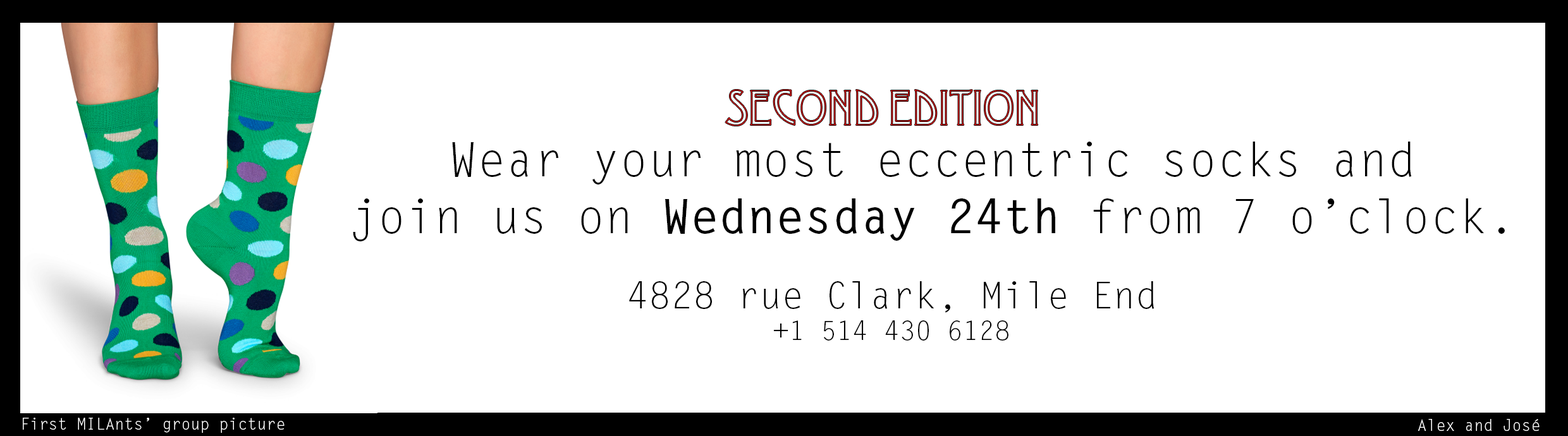
<style>
.page{position:relative;width:1568px;height:436px;background:#ffffff}
.page>*{position:absolute;margin:0}
.t1{font:47.4px "Desdemona";color:#f31010}
.t2{font:47.4px "LetterGothicStd";color:#000000}
.t3{font:47.4px "LetterGothicStd-Bold";color:#000000}
.t4{font:36.9px "LetterGothicStd";color:#000000}
.t5{font:26.3px "LetterGothicStd";color:#000000}
.t6{font:15.8px "LetterGothicStd";color:#ffffff}
</style>
<div class="page">
<p class="t1" style="left:725px;top:90px;width:313px;height:36px">SECOND EDITION</p>
<p class="t2" style="left:353px;top:142px;width:1152px;height:100px;text-align:center">Wear your most eccentric socks and<br>join us on <span class="t3">Wednesday 24th</span> from 7 o’clock.</p>
<p class="t4" style="left:629px;top:281px;width:526px;height:60px;text-align:center">4828 rue Clark, Mile End<br><span class="t5">+1 514 430 6128</span></p>
<p class="t6" style="left:23px;top:418px;width:262px;height:15px">First MILAnts’ group picture</p>
<p class="t6" style="left:1418px;top:419px;width:122px;height:12px">Alex and José</p>
</div>
